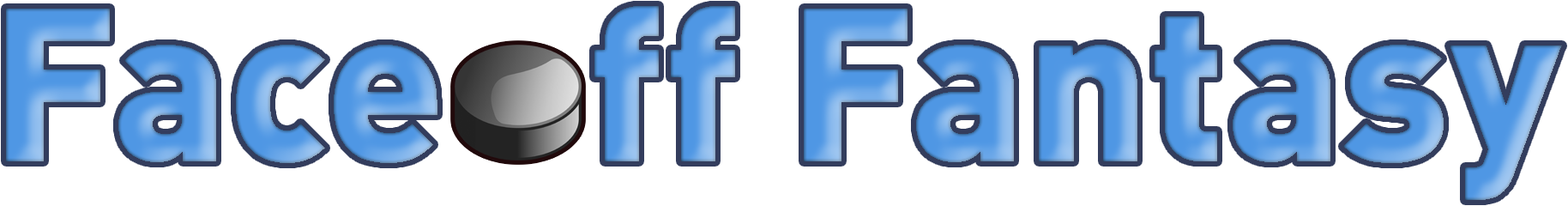
<style>
.page{position:relative;width:1568px;height:206px;background:#ffffff}
.page>*{position:absolute;margin:0}
.t1{font:214.4px "DIN-BlackAlternate"}
</style>
<div class="page">
<p class="t1" style="left:6px;top:6px;width:1556px;height:194px">Face   ff Fantasy</p>
</div>
